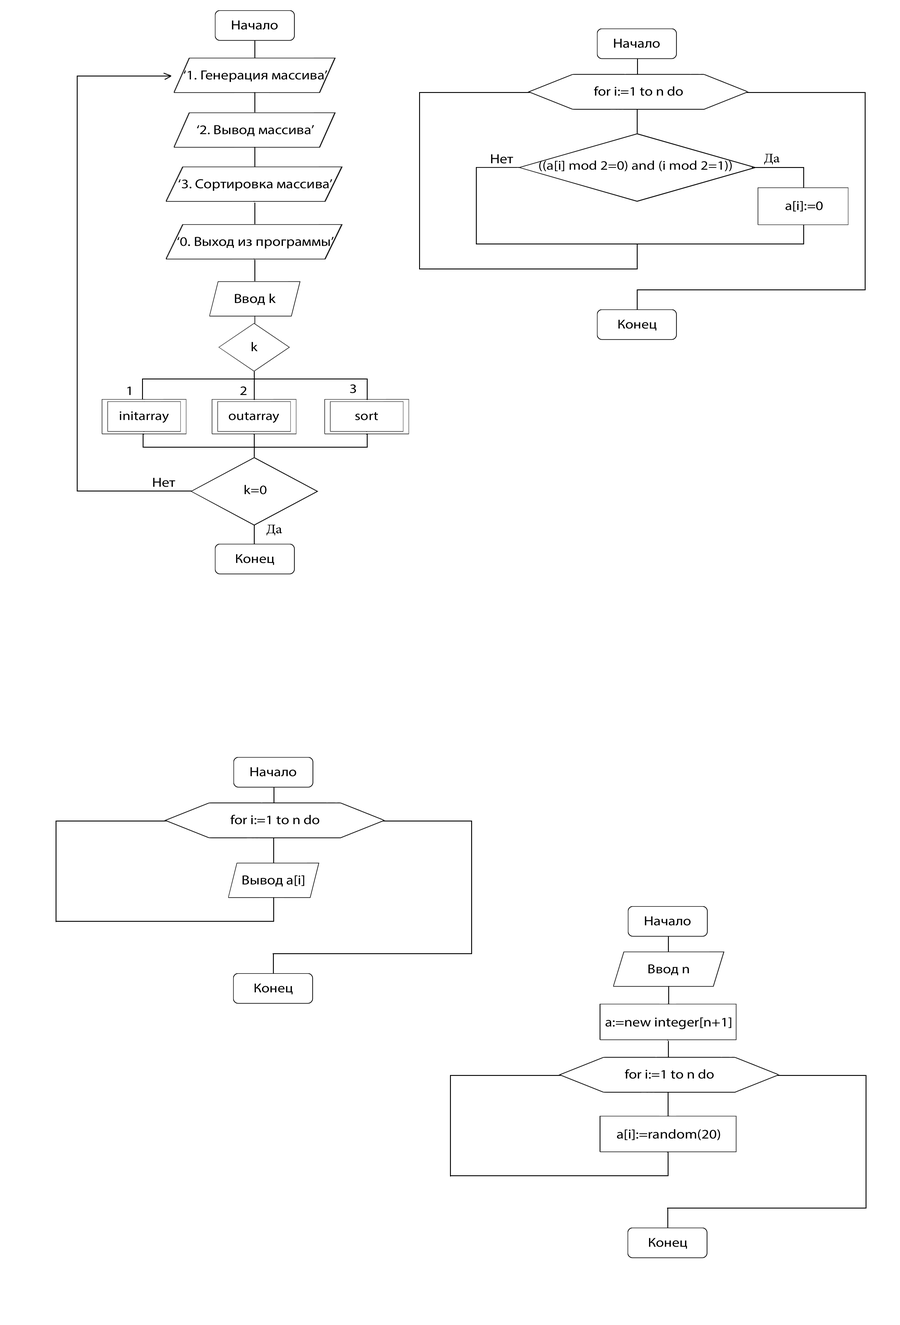
<style>
.page{position:relative;width:900px;height:1325px;background:#ffffff}
.page>*{position:absolute;margin:0}
.t1{font:13.2px "MyriadPro-Regular";color:#000000;scale:1.14 1}
.t2{font:12.9px "MyriadPro-Regular";color:#000000;scale:1.14 1}
.t3{font:13.2px "MyriadPro-Regular";color:#000000;scale:1.13 1}
.t4{font:12.8px "MyriadPro-Regular";color:#000000;scale:1.14 1}
</style>
<div class="page">
<p class="t1" style="left:232px;top:20px;width:46px;height:10px">Начало</p>
<p class="t1" style="left:614px;top:39px;width:46px;height:9px">Начало</p>
<p class="t1" style="left:184px;top:70px;width:143px;height:12px">‘1. Генерация массива’</p>
<p class="t2" style="left:594px;top:86px;width:89px;height:10px">for i:=1 to n do</p>
<p class="t1" style="left:197px;top:125px;width:117px;height:11px">‘2. Вывод массива’</p>
<p class="t3" style="left:491px;top:154px;width:22px;height:10px">Нет</p>
<p class="t2" style="left:539px;top:160px;width:193px;height:11px">((a[i] mod 2=0) and (i mod 2=1))</p>
<p class="t1" style="left:178px;top:179px;width:154px;height:12px">‘3. Сортировка массива’</p>
<p class="t2" style="left:785px;top:201px;width:38px;height:10px">a[i]:=0</p>
<p class="t1" style="left:177px;top:237px;width:157px;height:12px">‘0. Выход из программы’</p>
<p class="t1" style="left:235px;top:294px;width:41px;height:11px">Ввод k</p>
<p class="t2" style="left:618px;top:320px;width:38px;height:11px">Конец</p>
<p class="t2" style="left:251px;top:342px;width:7px;height:9px">k</p>
<p class="t2" style="left:127px;top:386px;width:4px;height:9px">1</p>
<p class="t2" style="left:240px;top:386px;width:6px;height:9px">2</p>
<p class="t2" style="left:350px;top:384px;width:6px;height:9px">3</p>
<p class="t4" style="left:120px;top:411px;width:49px;height:12px">initarray</p>
<p class="t4" style="left:229px;top:412px;width:50px;height:11px">outarray</p>
<p class="t4" style="left:355px;top:412px;width:23px;height:8px">sort</p>
<p class="t3" style="left:153px;top:478px;width:22px;height:9px">Нет</p>
<p class="t2" style="left:244px;top:485px;width:22px;height:9px">k=0</p>
<p class="t2" style="left:236px;top:554px;width:38px;height:11px">Конец</p>
<p class="t1" style="left:250px;top:767px;width:46px;height:9px">Начало</p>
<p class="t2" style="left:230px;top:815px;width:89px;height:9px">for i:=1 to n do</p>
<p class="t1" style="left:242px;top:875px;width:62px;height:11px">Вывод a[i]</p>
<p class="t1" style="left:645px;top:916px;width:46px;height:10px">Начало</p>
<p class="t2" style="left:648px;top:964px;width:41px;height:11px">Ввод n</p>
<p class="t2" style="left:254px;top:984px;width:39px;height:10px">Конец</p>
<p class="t1" style="left:605px;top:1017px;width:126px;height:12px">a:=new integer[n+1]</p>
<p class="t2" style="left:625px;top:1069px;width:89px;height:10px">for i:=1 to n do</p>
<p class="t1" style="left:617px;top:1129px;width:103px;height:11px">a[i]:=random(20)</p>
<p class="t2" style="left:649px;top:1238px;width:38px;height:11px">Конец</p>
</div>
